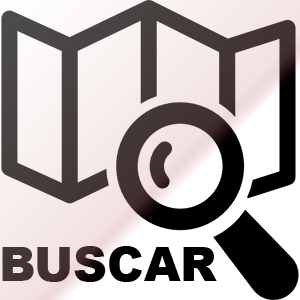
<style>
.page{position:relative;width:300px;height:300px}
.page>*{position:absolute;margin:0}
.t1{font:47px "Arial-Black"}
</style>
<div class="page">
<p class="t1" style="left:2px;top:246px;width:215px;height:36px">BUSCAR</p>
</div>
